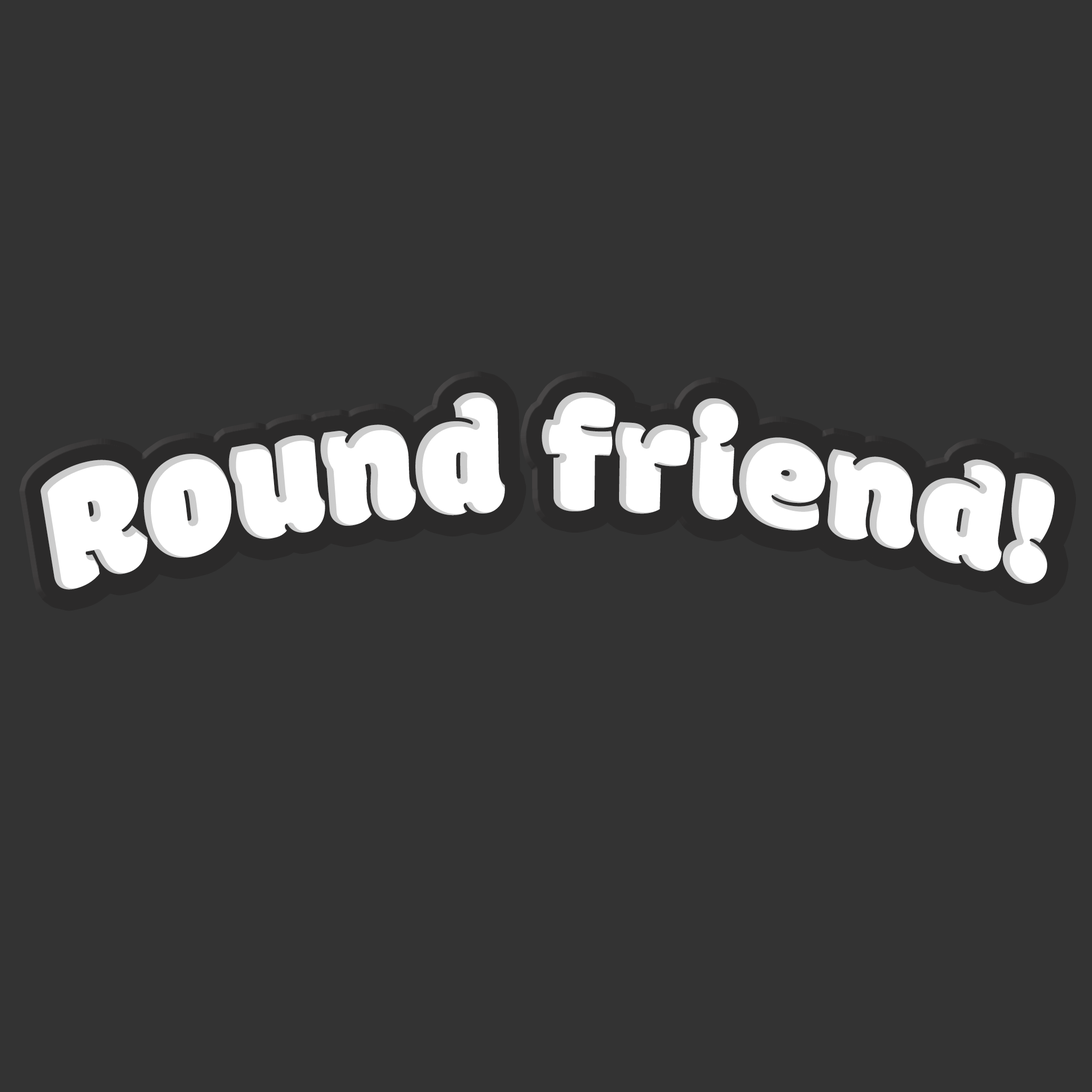
<style>
.page{position:relative;width:1092px;height:1092px;background:#333333}
.page>*{position:absolute;margin:0}
.t1{font:172.2px "Modak";color:#ffffff;scale:0.87 1}
</style>
<div class="page">
<p class="t1" style="left:41px;top:392px;width:1014px;height:198px">Round friend!</p>
</div>
